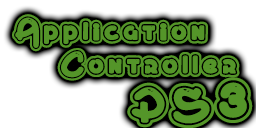
<style>
.page{position:relative;width:256px;height:128px;background:#ffffff}
.page>*{position:absolute;margin:0}
.t1{font:36px "MontRoyal";color:#549529}
.t2{font:48px "MontRoyal";color:#549529}
</style>
<div class="page">
<p class="t1" style="left:12px;top:14px;width:196px;height:38px">Application</p>
<p class="t1" style="left:57px;top:48px;width:183px;height:33px">Controller</p>
<p class="t2" style="left:127px;top:77px;width:126px;height:52px">PS3</p>
</div>
